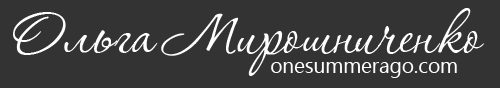
<style>
.page{position:relative;width:500px;height:88px;background:#333333}
.page>*{position:absolute;margin:0}
.t1{font:75px "Corinthia";color:#ffffff}
.t2{font:20.7px "Ebrima";color:#ffffff}
</style>
<div class="page">
<p class="t1" style="left:13px;top:8px;width:471px;height:68px">Ольга Мирошниченко</p>
<p class="t2" style="left:271px;top:62px;width:186px;height:16px">onesummerago.com</p>
</div>
